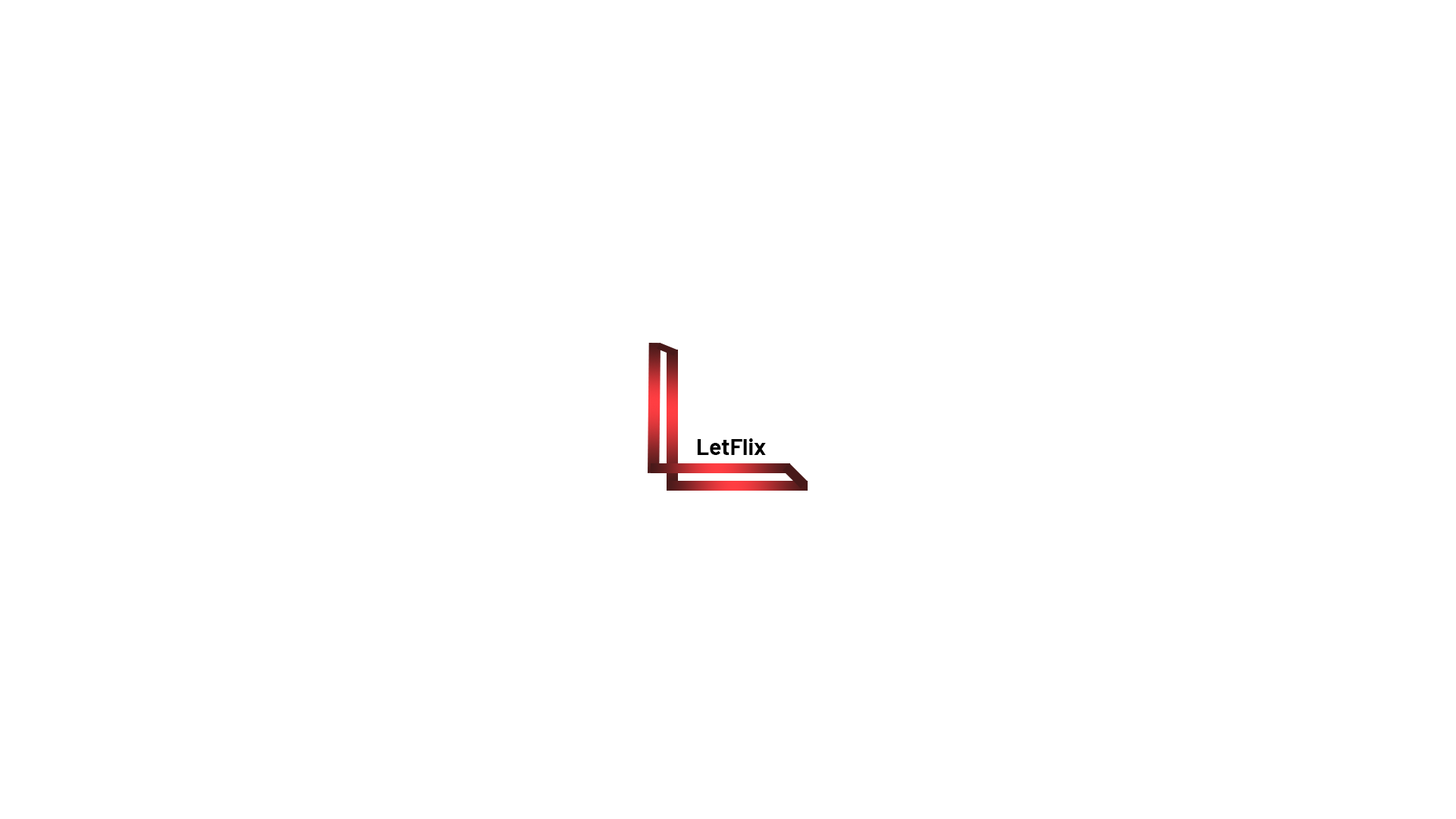
<style>
.page{position:relative;width:1456px;height:819px;background:#ffffff}
.page>*{position:absolute;margin:0}
.t1{font:22.7px "Barlow-Bold";color:#000000}
</style>
<div class="page">
<p class="t1" style="left:697px;top:438px;width:69px;height:17px">LetFlix</p>
</div>
